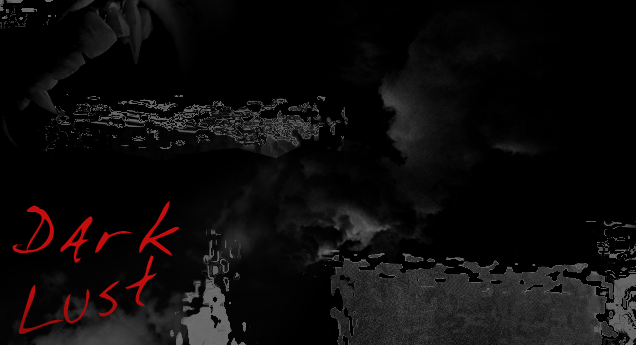
<style>
.page{position:relative;width:636px;height:345px;background:#000000}
.page>*{position:absolute;margin:0}
.t1{font:75px "GiffordsHand";color:#c60d0d}
.t2{font:75px "GiffordsHand";color:#ad0d0d}
</style>
<div class="page">
<p class="t1" style="left:12px;top:201px;width:168px;height:62px">Dark</p>
<p class="t2" style="left:18px;top:255px;width:139px;height:79px;rotate:-14deg">Lust</p>
</div>
